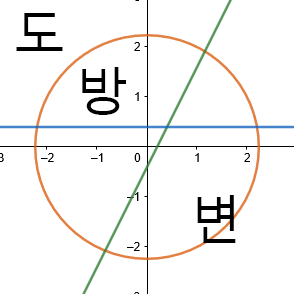
<style>
.page{position:relative;width:294px;height:294px;background:#ffffff}
.page>*{position:absolute;margin:0}
.t1{font:53.3px "MalgunGothic";color:#000000}
</style>
<div class="page">
<p class="t1" style="left:16px;top:13px;width:47px;height:38px">도</p>
<p class="t1" style="left:82px;top:67px;width:44px;height:48px">방</p>
<p class="t1" style="left:197px;top:195px;width:39px;height:48px">변</p>
</div>
